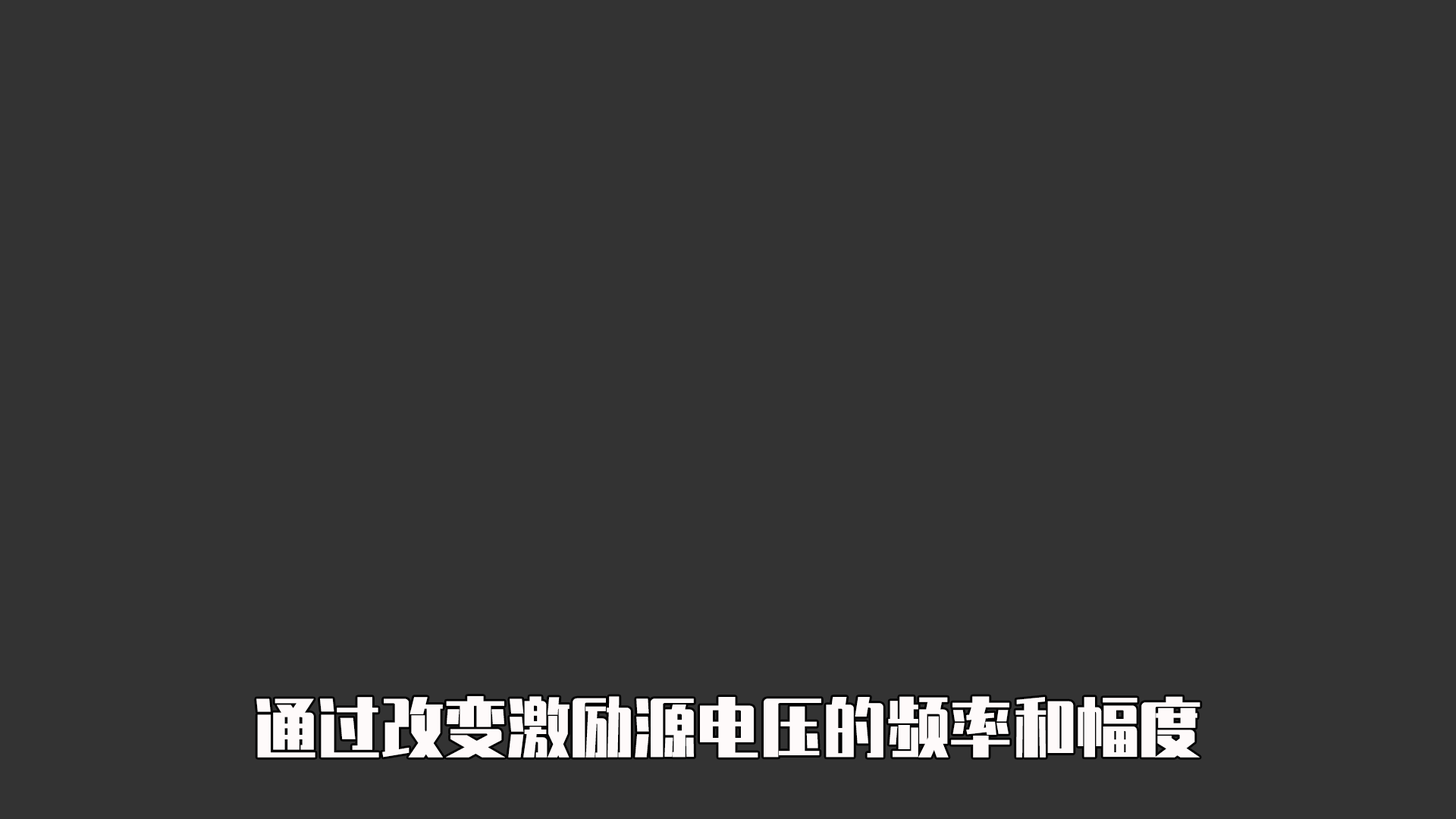
<style>
.page{position:relative;width:1456px;height:819px;background:#333333}
.page>*{position:absolute;margin:0}
.t1{font:63.2px "ZhenyanGB-Regular";color:#fefafa}
</style>
<div class="page">
<p class="t1" style="left:256px;top:696px;width:944px;height:62px">通过改变激励源电压的频率和幅度</p>
</div>
